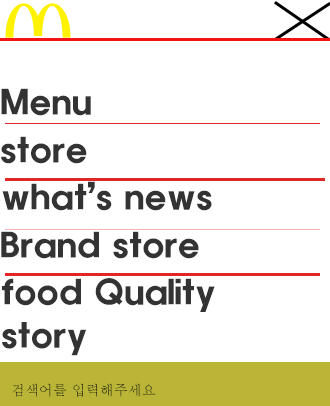
<style>
.page{position:relative;width:330px;height:406px;background:#ffffff}
.page>*{position:absolute;margin:0}
.t1{font:36px "HaanYHeadB";color:#333333}
.t2{font:14px "Batang"}
</style>
<div class="page">
<p class="t1" style="left:1px;top:88px;width:90px;height:28px">Menu</p>
<p class="t1" style="left:1px;top:136px;width:86px;height:28px">store</p>
<p class="t1" style="left:2px;top:181px;width:210px;height:30px">what’s news</p>
<p class="t1" style="left:1px;top:231px;width:198px;height:28px">Brand store</p>
<p class="t1" style="left:2px;top:278px;width:213px;height:78px">food Quality<br>story</p>
<p class="t2" style="left:12px;top:383px;width:144px;height:14px">검색어를 입력해주세요</p>
</div>
